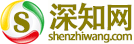
<style>
.page{position:relative;width:134px;height:44px;background:#fefefc}
.page>*{position:absolute;margin:0}
.t1{font:30px "AdobeHeitiStd-Regular";letter-spacing:-0.09em;color:#8a7e03;font-weight:bold}
.t2{font:30px "BritannicBold";letter-spacing:-0.09em;color:#8a7e03;font-weight:bold}
.t3{font:11px "AdobeHeitiStd-Regular";letter-spacing:-0.09em;color:#8a7e03;font-weight:bold;scale:1.04 1}
</style>
<div class="page">
<p class="t1" style="left:49px;top:2px;width:83px;height:29px">深知网</p>
<p class="t2" style="left:13px;top:11px;width:17px;height:22px">S</p>
<p class="t3" style="left:48px;top:31px;width:84px;height:12px">shenzhiwang.com</p>
</div>
